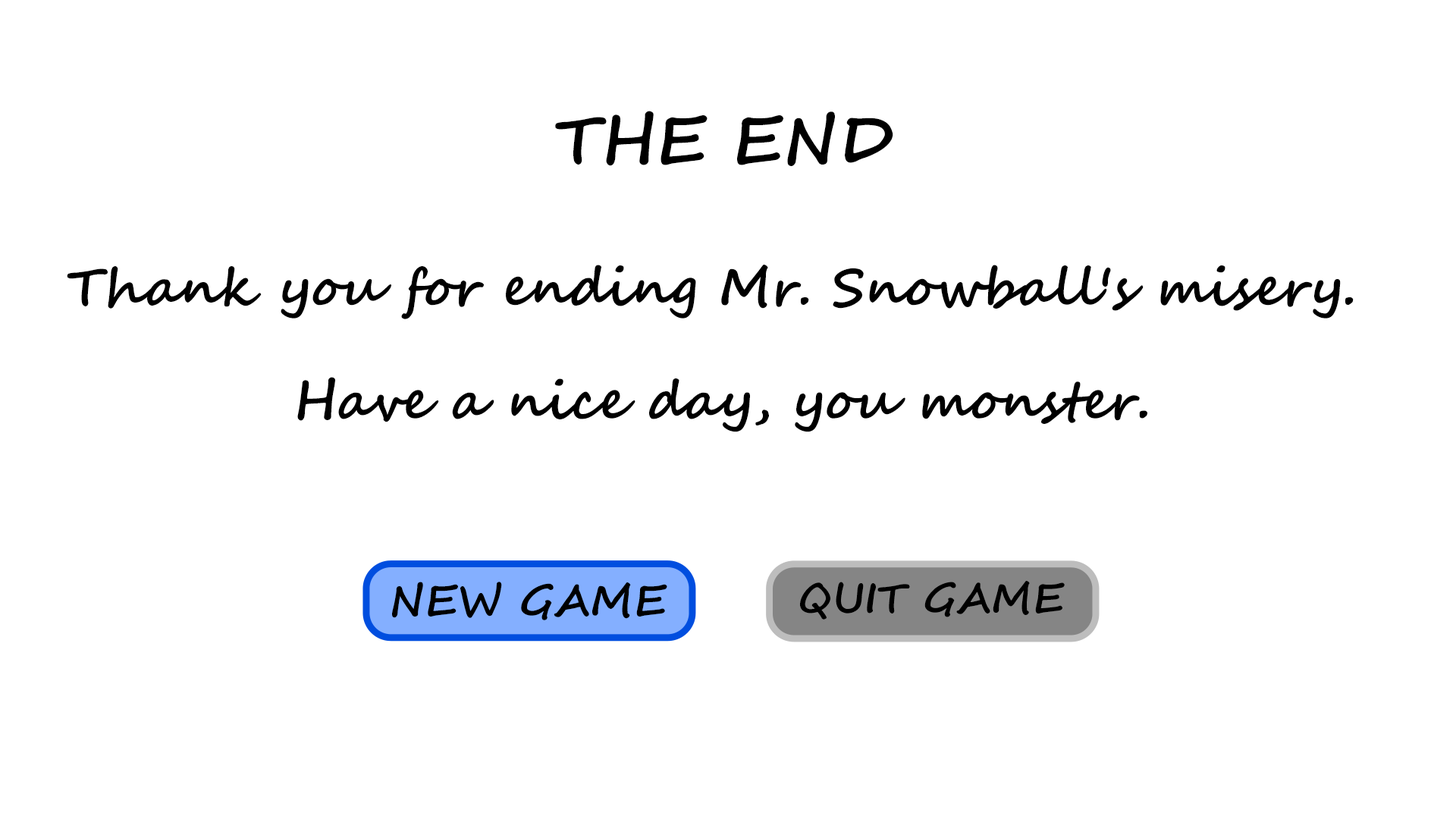
<style>
.page{position:relative;width:1456px;height:819px;background:#ffffff}
.page>*{position:absolute;margin:0}
.t1{font:66.4px "SegoeScript-Bold";color:#000000}
.t2{font:52.7px/113.3px "SegoeScript-Bold";color:#000000}
.t3{font:43.3px "SegoeScript-Bold";color:#000000}
.t4{font:41.4px "SegoeScript-Bold";color:#000000}
</style>
<div class="page">
<p class="t1" style="left:555px;top:111px;width:338px;height:55px">THE END</p>
<p class="t2" style="left:67px;top:265px;width:1287px;height:167px;text-align:center">Thank you for ending Mr. Snowball's misery. <br>Have a nice day, you monster.</p>
<p class="t3" style="left:392px;top:582px;width:275px;height:38px">NEW GAME</p>
<p class="t4" style="left:800px;top:581px;width:265px;height:39px">QUIT GAME</p>
</div>
